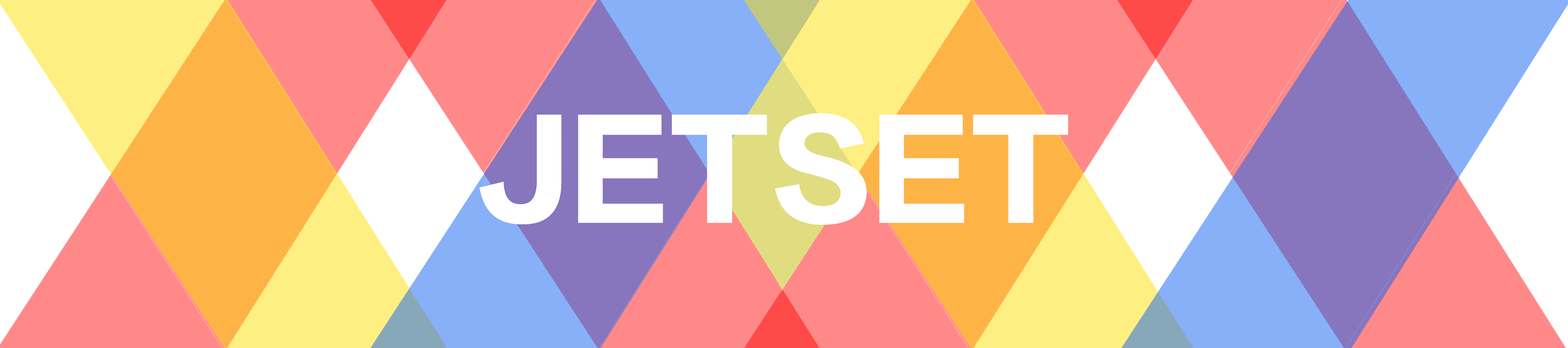
<style>
.page{position:relative;width:1568px;height:348px;background:#ff8989}
.page>*{position:absolute;margin:0}
.t1{font:125.5px "FZLTTHB--B51-0";color:#ffffff}
</style>
<div class="page">
<p class="t1" style="left:479px;top:113px;width:589px;height:112px">JETSET</p>
</div>
